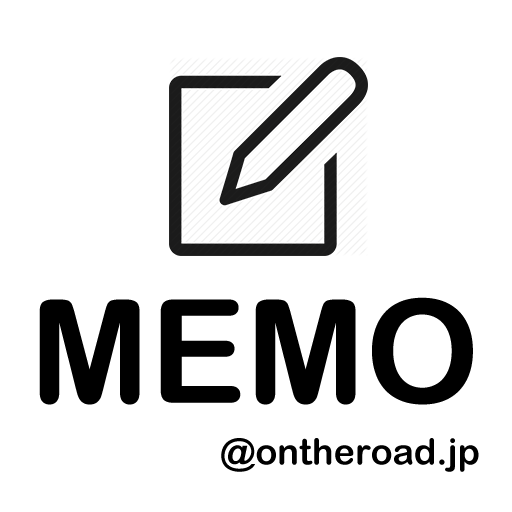
<style>
.page{position:relative;width:512px;height:512px;background:#ffffff}
.page>*{position:absolute;margin:0}
.t1{font:144px "ArialRoundedMTBold";color:#000000}
.t2{font:36px "ArialRoundedMTBold";color:#000000}
</style>
<div class="page">
<p class="t1" style="left:39px;top:297px;width:434px;height:108px">MEMO</p>
<p class="t2" style="left:221px;top:438px;width:258px;height:34px">@ontheroad.jp</p>
</div>
